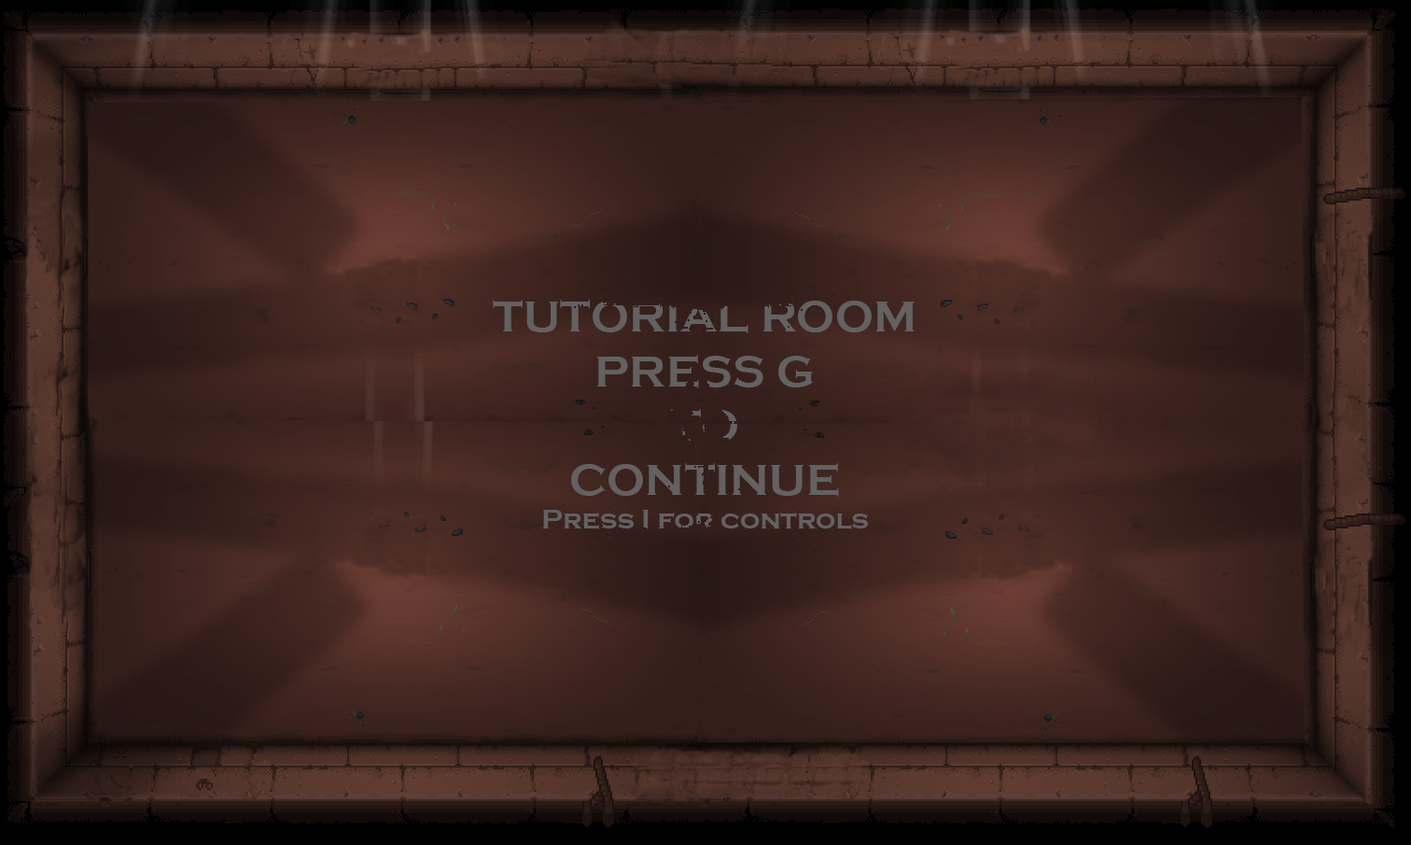
<style>
.page{position:relative;width:1411px;height:845px}
.page>*{position:absolute;margin:0}
.t1{font:45.2px "CopperplateGothic-Bold";color:#636161}
.t2{font:28px "CopperplateGothic-Bold";color:#636161}
</style>
<div class="page">
<p class="t1" style="left:493px;top:300px;width:422px;height:229px;text-align:center">TUTORIAL ROOM<br>PRESS G<br>TO<br>CONTINUE<br><span class="t2">Press I for controls</span></p>
</div>
